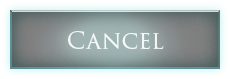
<style>
.page{position:relative;width:230px;height:79px}
.page>*{position:absolute;margin:0}
.t1{font:24px "TrajanPro3-Regular";color:#f1f1f1}
</style>
<div class="page">
<p class="t1" style="left:68px;top:31px;width:96px;height:18px">Cancel</p>
</div>
